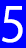
<style>
.page{position:relative;width:26px;height:48px;background:#0000ff}
.page>*{position:absolute;margin:0}
.t1{font:47.6px "KozGoPr6N-Regular";color:#ffffff}
</style>
<div class="page">
<p class="t1" style="left:2px;top:6px;width:21px;height:37px">5</p>
</div>
